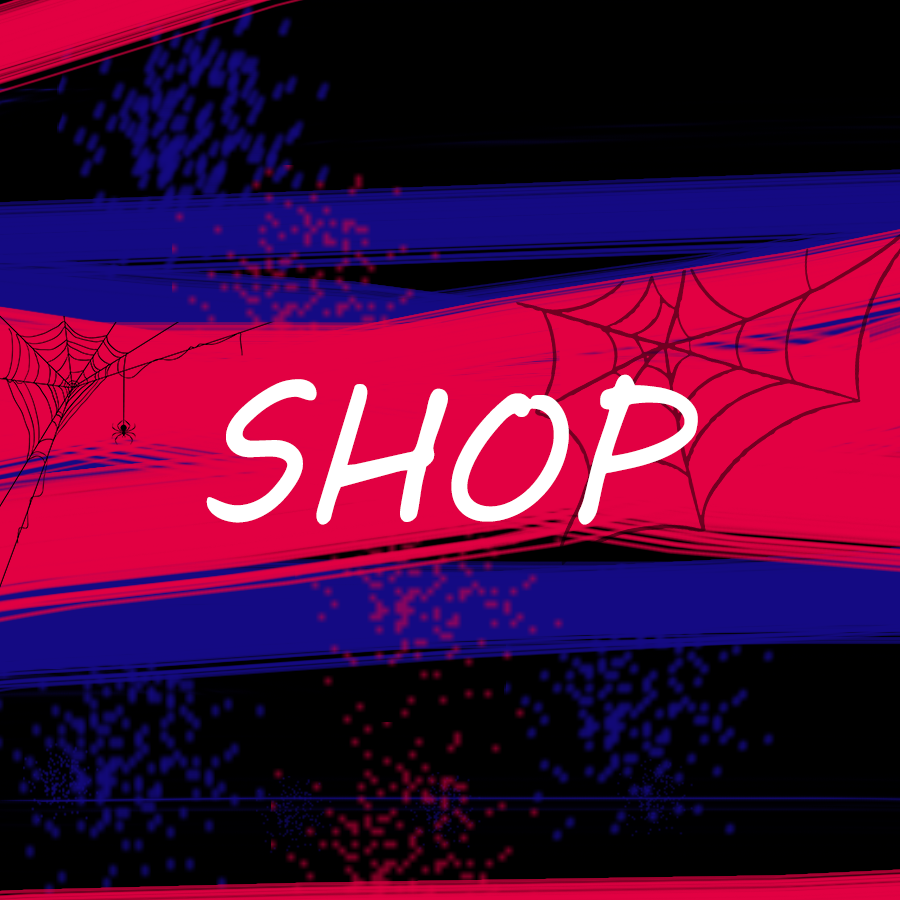
<style>
.page{position:relative;width:900px;height:900px;background:#000000}
.page>*{position:absolute;margin:0}
.t1{font:180px "MVBoli";color:#ffffff}
</style>
<div class="page">
<p class="t1" style="left:206px;top:374px;width:492px;height:151px">SHOP</p>
</div>
